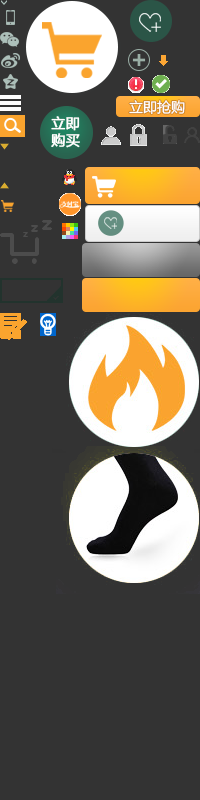
<style>
.page{position:relative;width:200px;height:800px;background:#333333}
.page>*{position:absolute;margin:0}
.t1{font:14px "MicrosoftYaHei";color:#ffffff;text-transform:uppercase}
.t2{font:14px/17px "MicrosoftYaHei";color:#ffffff;font-weight:bold}
</style>
<div class="page">
<p class="t1" style="left:129px;top:100px;width:56px;height:15px">立即抢购</p>
<p class="t2" style="left:51px;top:116px;width:29px;height:32px">立即<br>购买</p>
</div>
